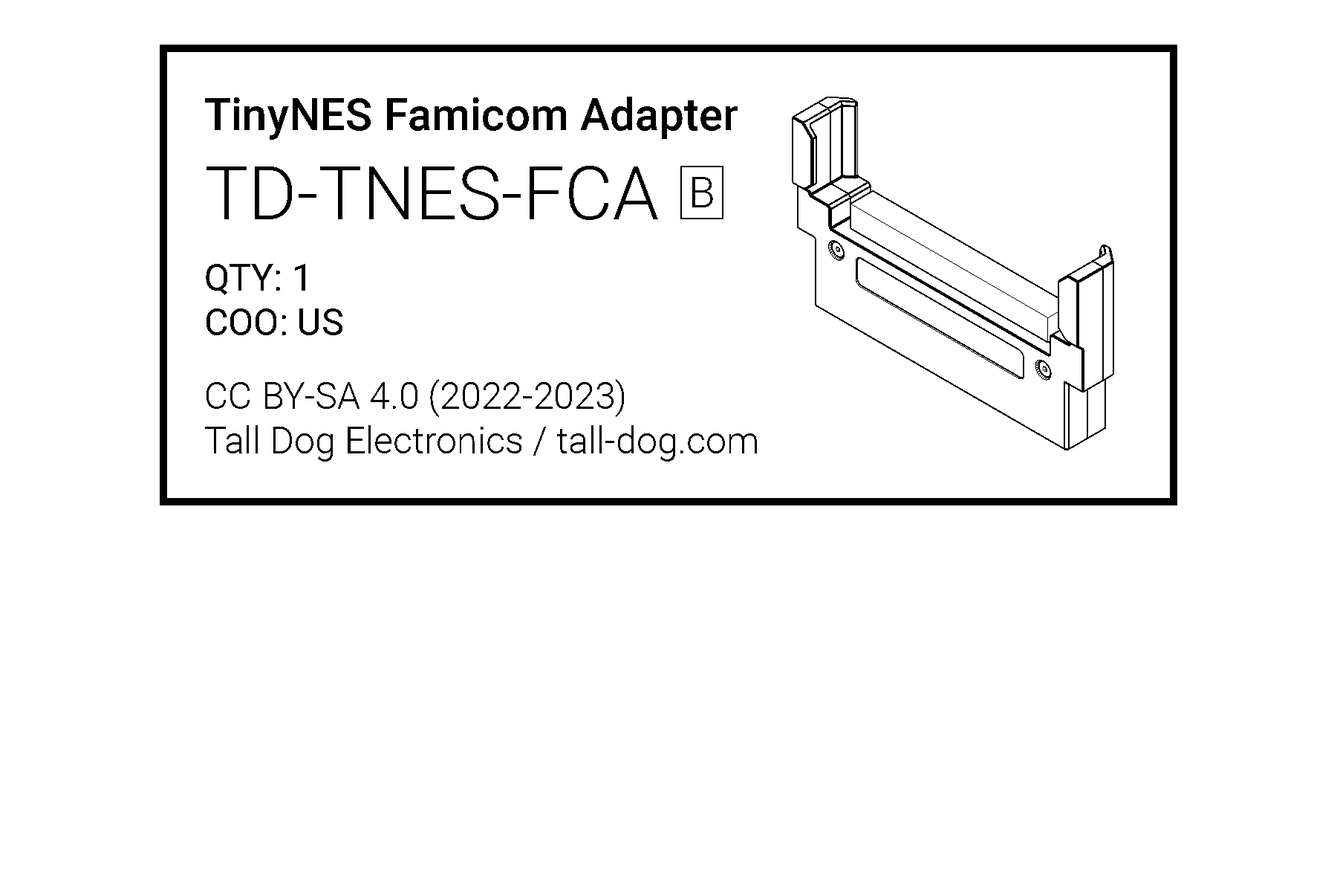
<style>
.page{position:relative;width:1337px;height:892px;background:#ffffff}
.page>*{position:absolute;margin:0}
.t1{font:44.6px "Roboto-Medium";color:#000000}
.t2{font:74.3px "Roboto-Light";color:#000000}
.t3{font:37.2px "Roboto-Regular";color:#000000}
.t4{font:43.3px "Roboto-Light";color:#000000}
.t5{font:37.2px "Roboto-Light";color:#000000}
</style>
<div class="page">
<p class="t1" style="left:205px;top:97px;width:533px;height:238px">TinyNES Famicom Adapter<br><span class="t2">TD-TNES-FCA<br><br></span><span class="t3">QTY: 1<br>COO: US</span></p>
<p class="t4" style="left:692px;top:177px;width:21px;height:30px">B</p>
<p class="t5" style="left:205px;top:379px;width:552px;height:82px">CC BY-SA 4.0 (2022-2023)<br>Tall Dog Electronics / tall-dog.com</p>
</div>
